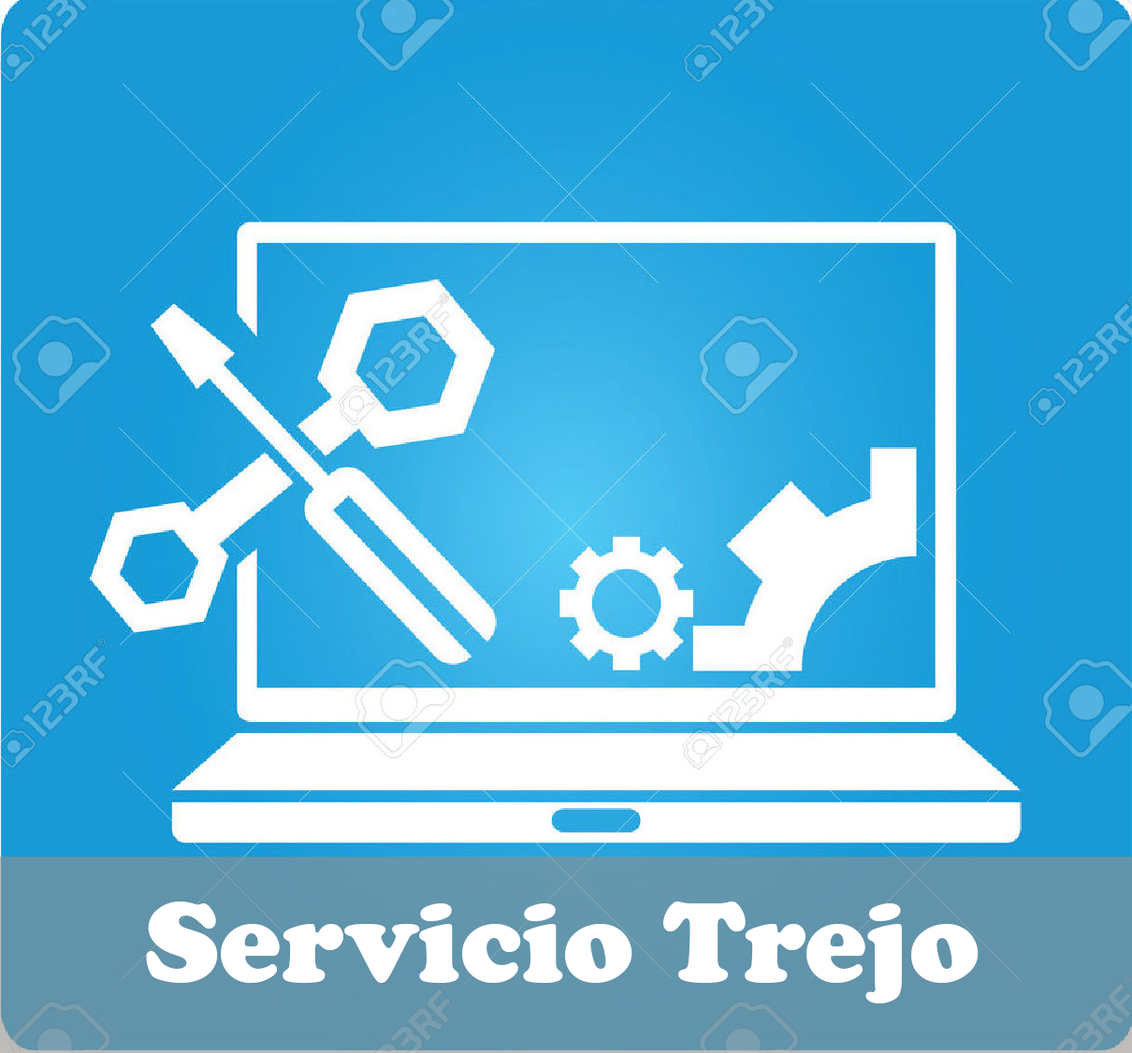
<style>
.page{position:relative;width:1132px;height:1053px}
.page>*{position:absolute;margin:0}
.t1{font:116.9px "CooperBlack";color:#ffffff}
</style>
<div class="page">
<p class="t1" style="left:146px;top:902px;width:833px;height:102px">Servicio Trejo</p>
</div>
